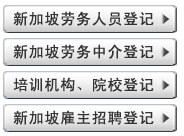
<style>
.page{position:relative;width:184px;height:136px;background:#ffffff}
.page>*{position:absolute;margin:0}
.t1{font:15px "SimHei";letter-spacing:0.05em;color:#333333}
</style>
<div class="page">
<p class="t1" style="left:13px;top:11px;width:141px;height:15px">新加坡劳务人员登记</p>
<p class="t1" style="left:13px;top:44px;width:141px;height:15px">新加坡劳务中介登记</p>
<p class="t1" style="left:13px;top:77px;width:141px;height:15px">培训机构、院校登记</p>
<p class="t1" style="left:13px;top:110px;width:141px;height:15px">新加坡雇主招聘登记</p>
</div>
